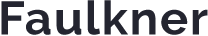
<style>
.page{position:relative;width:208px;height:36px;background:#ffffff}
.page>*{position:absolute;margin:0}
.t1{font:47px "Raleway-Bold";letter-spacing:0.04em;color:#242530}
</style>
<div class="page">
<p class="t1" style="left:1px;top:0px;width:207px;height:35px">Faulkner</p>
</div>
